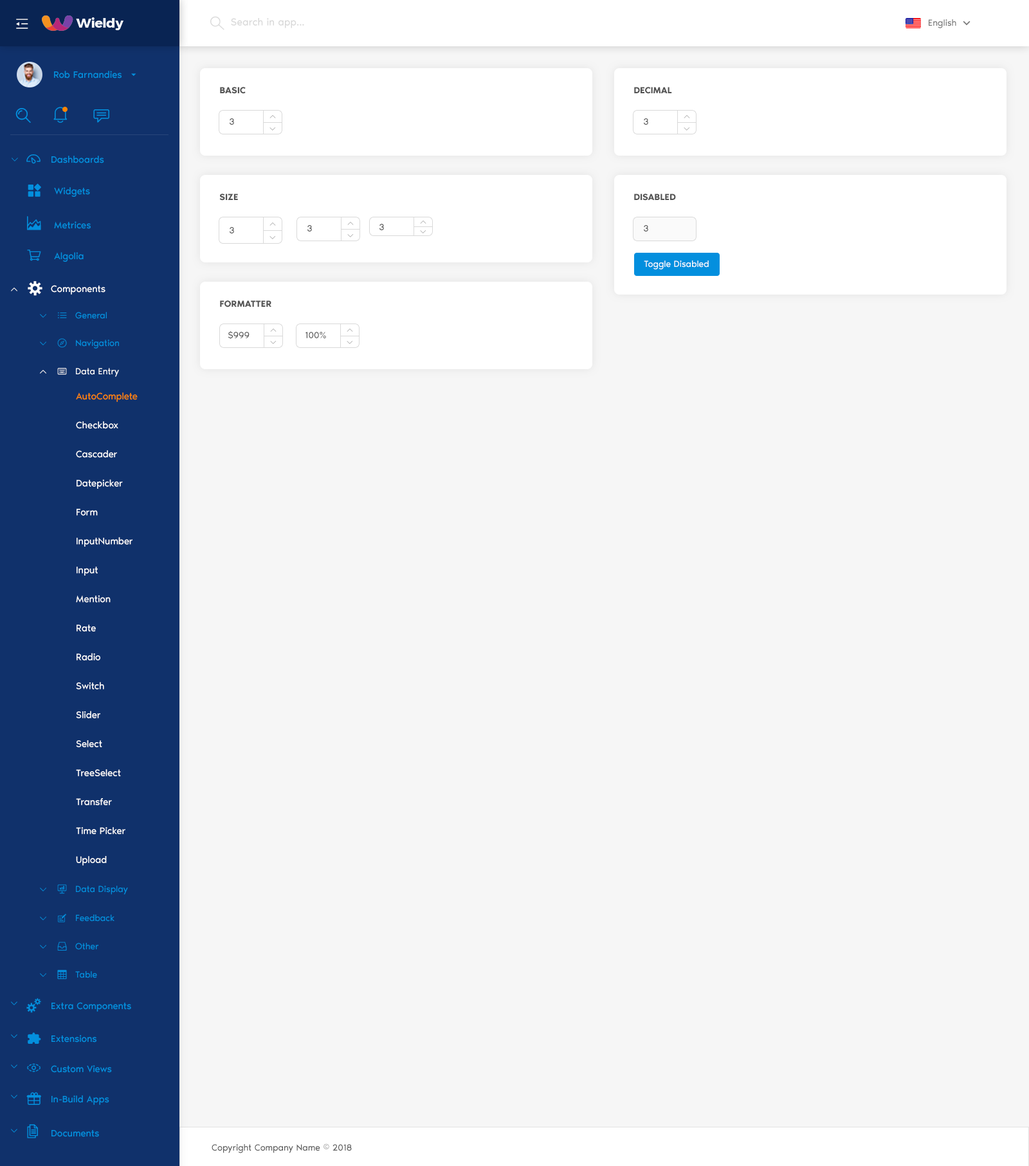
<style>
.page{position:relative;width:1029px;height:1166px;background:#f6f6f6}
.page>*{position:absolute;margin:0}
.t1{font:10.3px "NoirPro-Regular";color:#d9d9d9}
.t2{font:9px "NoirPro-Regular";color:#757575}
.t3{font:9.6px "NoirPro-Regular";color:#038fde}
.t4{font:9px "NoirPro-SemiBold";color:#535353;text-transform:uppercase}
.t5{font:9px "NoirPro-Regular";color:#545454}
.t6{font:10.3px "gaxondrift"}
.t7{font:7.7px "gaxonant"}
.t8{font:14.1px "gaxonant";color:#038fde}
.t9{font:9px "NoirPro-Regular";color:#ffffff}
.t10{font:14.1px "gaxonant";color:#ffffff}
.t11{font:9.6px "NoirPro-Regular";color:#ffffff}
.t12{font:7.7px "gaxonant";color:#038fde}
.t13{font:9px "gaxonant";color:#038fde}
.t14{font:9px "NoirPro-Regular";color:#038fde}
.t15{font:9px "gaxonant";color:#ffffff}
.t16{font:9.6px/25.7px "NoirPro-Regular";color:#ffffff}
.t17{font:9.6px/25.7px "NoirPro-Regular";color:#ff8400}
.t18{font:7.5px "gaxonant";color:#038fde}
.t19{font:9px "NoirPro-Regular";color:#595959}
</style>
<div class="page">
<p class="t1" style="left:231px;top:18px;width:73px;height:10px">Search in app...</p>
<p class="t2" style="left:928px;top:19px;width:28px;height:9px">English</p>
<p class="t3" style="left:54px;top:71px;width:68px;height:7px">Rob Farnandies</p>
<p class="t4" style="left:220px;top:87px;width:26px;height:7px">Basic</p>
<p class="t4" style="left:634px;top:87px;width:38px;height:7px">Decimal</p>
<p class="t5" style="left:230px;top:118px;width:4px;height:7px">3</p>
<p class="t6" style="left:269px;top:115px;width:7px;height:3px">3</p>
<p class="t5" style="left:644px;top:118px;width:4px;height:7px">3</p>
<p class="t6" style="left:683px;top:115px;width:7px;height:3px">3</p>
<p class="t6" style="left:269px;top:127px;width:7px;height:3px">0</p>
<p class="t6" style="left:683px;top:127px;width:7px;height:3px">0</p>
<p class="t7" style="left:12px;top:158px;width:6px;height:3px">2</p>
<p class="t8" style="left:26px;top:154px;width:14px;height:10px">-</p>
<p class="t3" style="left:51px;top:156px;width:53px;height:7px">Dashboards</p>
<p class="t3" style="left:54px;top:187px;width:36px;height:10px">Widgets</p>
<p class="t4" style="left:219px;top:194px;width:19px;height:7px">Size</p>
<p class="t4" style="left:634px;top:194px;width:42px;height:7px">Disabled</p>
<p class="t8" style="left:27px;top:216px;width:14px;height:14px">m</p>
<p class="t3" style="left:54px;top:221px;width:37px;height:8px">Metrices</p>
<p class="t6" style="left:347px;top:222px;width:7px;height:3px">3</p>
<p class="t6" style="left:420px;top:221px;width:6px;height:3px">3</p>
<p class="t5" style="left:230px;top:227px;width:4px;height:6px">3</p>
<p class="t6" style="left:269px;top:222px;width:7px;height:4px">3</p>
<p class="t5" style="left:307px;top:225px;width:5px;height:6px">3</p>
<p class="t5" style="left:379px;top:224px;width:5px;height:6px">3</p>
<p class="t6" style="left:420px;top:230px;width:6px;height:3px">0</p>
<p class="t5" style="left:644px;top:225px;width:4px;height:6px">3</p>
<p class="t6" style="left:269px;top:236px;width:7px;height:3px">0</p>
<p class="t6" style="left:347px;top:234px;width:7px;height:3px">0</p>
<p class="t3" style="left:54px;top:252px;width:30px;height:10px">Algolia</p>
<p class="t9" style="left:644px;top:260px;width:64px;height:9px">Toggle Disabled</p>
<p class="t10" style="left:28px;top:281px;width:14px;height:15px">%</p>
<p class="t7" style="left:11px;top:287px;width:6px;height:4px">5</p>
<p class="t11" style="left:51px;top:285px;width:54px;height:9px">Components</p>
<p class="t4" style="left:220px;top:300px;width:51px;height:7px">Formatter</p>
<p class="t12" style="left:40px;top:314px;width:6px;height:4px">2</p>
<p class="t13" style="left:58px;top:312px;width:9px;height:6px">h</p>
<p class="t14" style="left:75px;top:312px;width:32px;height:7px">General</p>
<p class="t6" style="left:270px;top:328px;width:6px;height:4px">3</p>
<p class="t6" style="left:346px;top:328px;width:7px;height:4px">3</p>
<p class="t12" style="left:40px;top:341px;width:6px;height:4px">2</p>
<p class="t14" style="left:76px;top:339px;width:43px;height:9px">Navigation</p>
<p class="t5" style="left:228px;top:331px;width:21px;height:8px">$999</p>
<p class="t6" style="left:270px;top:341px;width:6px;height:3px">0</p>
<p class="t5" style="left:305px;top:332px;width:21px;height:6px">100%</p>
<p class="t6" style="left:346px;top:341px;width:7px;height:3px">0</p>
<p class="t7" style="left:40px;top:370px;width:6px;height:4px">5</p>
<p class="t15" style="left:57px;top:368px;width:10px;height:7px">/</p>
<p class="t9" style="left:76px;top:368px;width:43px;height:9px">Data Entry</p>
<p class="t16" style="left:76px;top:392px;width:62px;height:473px"><span class="t17">AutoComplete<br></span>Checkbox<br>Cascader<br>Datepicker<br>Form<br>InputNumber<br>Input<br>Mention<br>Rate<br>Radio<br>Switch<br>Slider<br>Select<br>TreeSelect<br>Transfer<br>Time Picker<br>Upload</p>
<p class="t12" style="left:40px;top:887px;width:6px;height:4px">2</p>
<p class="t13" style="left:57px;top:884px;width:10px;height:10px">.</p>
<p class="t14" style="left:76px;top:885px;width:52px;height:9px">Data Display</p>
<p class="t12" style="left:40px;top:916px;width:6px;height:4px">2</p>
<p class="t14" style="left:76px;top:914px;width:38px;height:7px">Feedback</p>
<p class="t12" style="left:40px;top:944px;width:6px;height:4px">2</p>
<p class="t14" style="left:75px;top:942px;width:23px;height:8px">Other</p>
<p class="t12" style="left:40px;top:973px;width:6px;height:4px">2</p>
<p class="t14" style="left:75px;top:971px;width:22px;height:7px">Table</p>
<p class="t18" style="left:11px;top:1001px;width:6px;height:4px">2</p>
<p class="t3" style="left:51px;top:1002px;width:80px;height:9px">Extra Components</p>
<p class="t18" style="left:11px;top:1034px;width:6px;height:4px">2</p>
<p class="t3" style="left:51px;top:1034px;width:45px;height:8px">Extensions</p>
<p class="t18" style="left:11px;top:1064px;width:6px;height:4px">2</p>
<p class="t8" style="left:27px;top:1063px;width:13px;height:9px">,</p>
<p class="t3" style="left:51px;top:1065px;width:61px;height:7px">Custom Views</p>
<p class="t18" style="left:11px;top:1094px;width:6px;height:4px">2</p>
<p class="t3" style="left:51px;top:1095px;width:58px;height:9px">In-Build Apps</p>
<p class="t18" style="left:11px;top:1128px;width:6px;height:4px">2</p>
<p class="t8" style="left:27px;top:1124px;width:11px;height:14px">)</p>
<p class="t3" style="left:51px;top:1130px;width:48px;height:7px">Documents</p>
<p class="t19" style="left:212px;top:1143px;width:140px;height:10px">Copyright Company Name © 2018</p>
</div>
